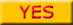
<style>
.page{position:relative;width:73px;height:25px;background:#ffc501}
.page>*{position:absolute;margin:0}
.t1{font:17.5px "Verdana";font-weight:bold}
</style>
<div class="page">
<p class="t1" style="left:18px;top:5px;width:36px;height:14px">YES</p>
</div>
